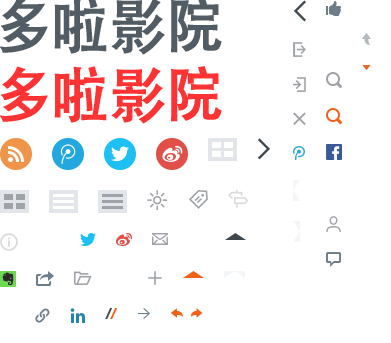
<style>
.page{position:relative;width:391px;height:343px;background:#ffffff}
.page>*{position:absolute;margin:0}
.t1{font:60px "AdobeHeitiStd-Regular";letter-spacing:0.1em;color:#ff3333;font-weight:bold;scale:0.94 1}
</style>
<div class="page">
<p class="t1" style="left:0px;top:66px;width:222px;height:58px">多啦影院</p>
</div>
